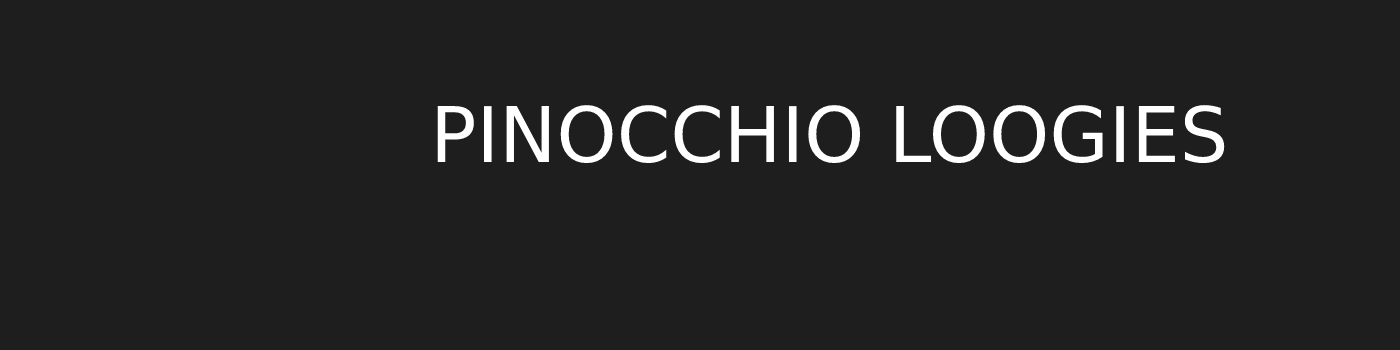
<style>
.page{position:relative;width:1400px;height:350px;background:#1e1e1e}
.page>*{position:absolute;margin:0}
.t1{font:76.6px "DejaVuSans";color:#ffffff}
</style>
<div class="page">
<p class="t1" style="left:437px;top:105px;width:788px;height:58px">PINOCCHIO LOOGIES</p>
</div>
